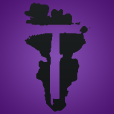
<style>
.page{position:relative;width:114px;height:114px}
.page>*{position:absolute;margin:0}
.t1{font:99px "VTKSREFUSED";color:#191c1c}
</style>
<div class="page">
<p class="t1" style="left:24px;top:2px;width:67px;height:110px">T</p>
</div>
